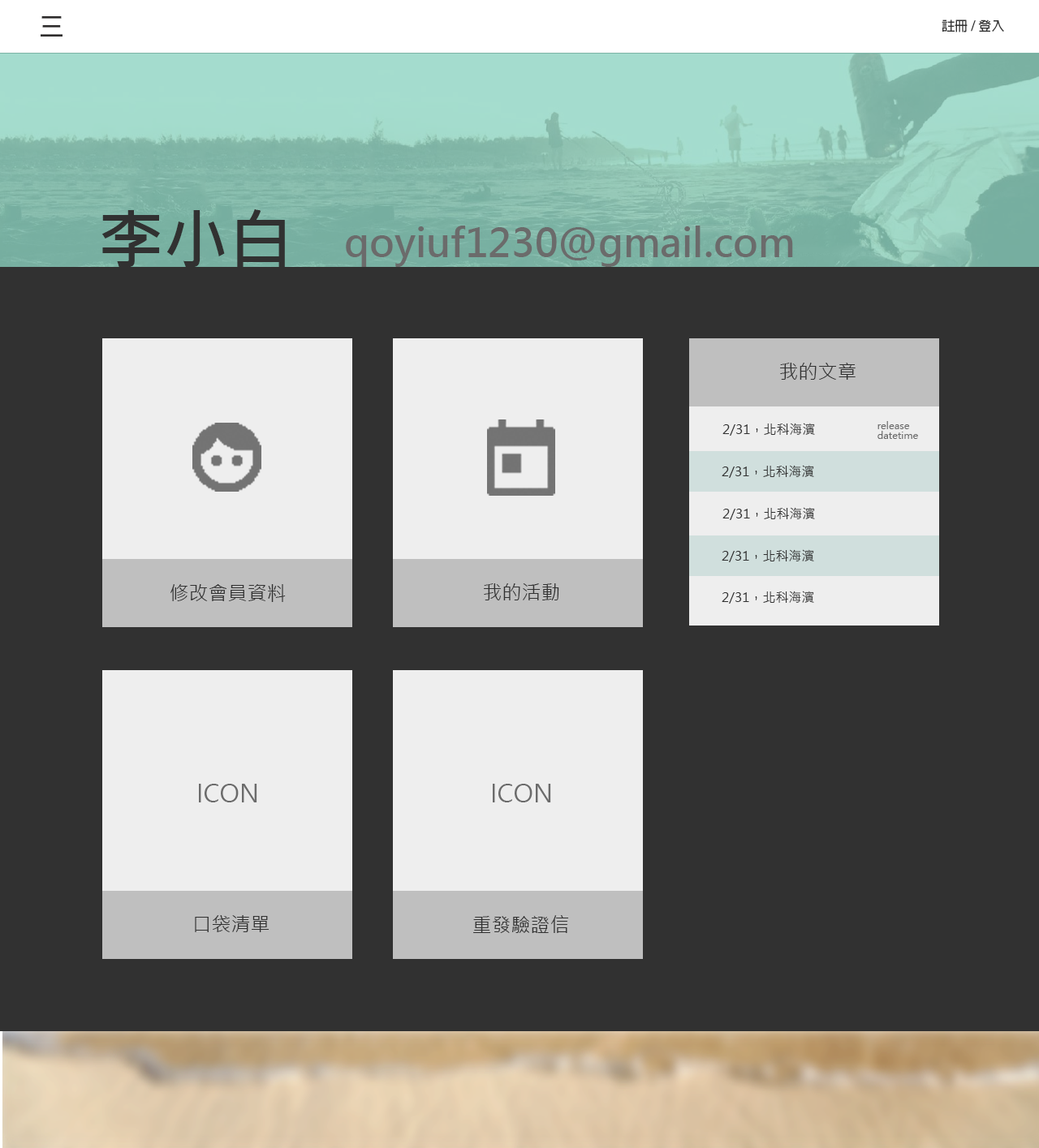
<style>
.page{position:relative;width:1039px;height:1148px;background:#313131}
.page>*{position:absolute;margin:0}
.t1{font:24.3px "AdobeFanHeitiStd-Bold";color:#2e2c2c}
.t2{font:13px "AdobeFanHeitiStd-Bold";color:#333333}
.t3{font:64.9px "MicrosoftJhengHeiBold";color:#313131}
.t4{font:38.9px "MicrosoftJhengHeiBold";color:#6b6b6b}
.t5{font:19.5px "MicrosoftJhengHeiRegular";color:#313131}
.t6{font:13px "MicrosoftJhengHeiRegular";color:#313131}
.t7{font:9.7px/9.7px "MicrosoftJhengHeiRegular";color:#6b6b6b}
.t8{font:24.3px "MicrosoftJhengHeiRegular";color:#6b6b6b}
</style>
<div class="page">
<p class="t1" style="left:41px;top:16px;width:21px;height:21px">三</p>
<p class="t2" style="left:941px;top:19px;width:63px;height:13px">註冊 / 登入</p>
<p class="t3" style="left:101px;top:209px;width:184px;height:58px">李小白</p>
<p class="t4" style="left:346px;top:226px;width:447px;height:41px">qoyiuf1230@gmail.com</p>
<p class="t5" style="left:780px;top:363px;width:75px;height:17px">我的文章</p>
<p class="t6" style="left:722px;top:423px;width:93px;height:13px">2/31，北科海濱</p>
<p class="t7" style="left:877px;top:421px;width:41px;height:18px">release<br>datetime</p>
<p class="t6" style="left:721px;top:465px;width:93px;height:13px">2/31，北科海濱</p>
<p class="t6" style="left:722px;top:507px;width:93px;height:13px">2/31，北科海濱</p>
<p class="t6" style="left:721px;top:549px;width:93px;height:13px">2/31，北科海濱</p>
<p class="t5" style="left:170px;top:584px;width:116px;height:18px">修改會員資料</p>
<p class="t5" style="left:484px;top:583px;width:75px;height:17px">我的活動</p>
<p class="t6" style="left:721px;top:591px;width:93px;height:13px">2/31，北科海濱</p>
<p class="t8" style="left:199px;top:784px;width:58px;height:18px">ICON</p>
<p class="t8" style="left:493px;top:784px;width:58px;height:18px">ICON</p>
<p class="t5" style="left:195px;top:915px;width:74px;height:17px">口袋清單</p>
<p class="t5" style="left:473px;top:915px;width:96px;height:18px">重發驗證信</p>
</div>
